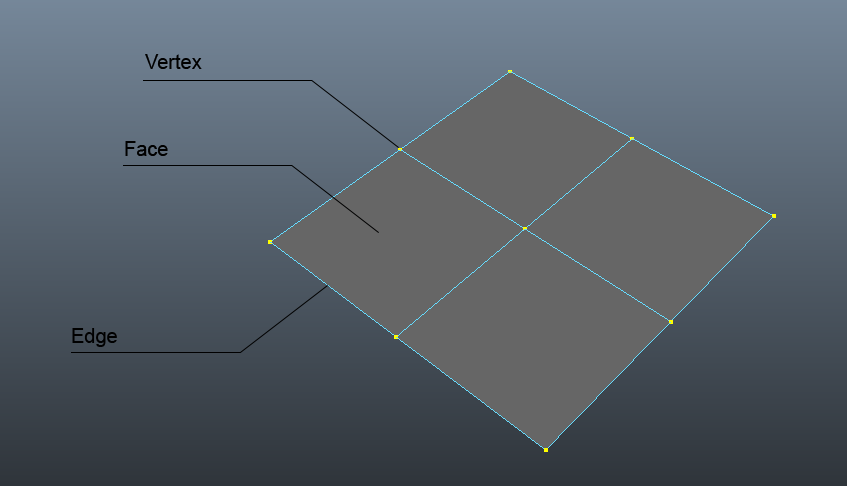
<style>
.page{position:relative;width:847px;height:486px;background:#666666}
.page>*{position:absolute;margin:0}
.t1{font:20px "ArialMT";color:#000000}
</style>
<div class="page">
<p class="t1" style="left:145px;top:54px;width:57px;height:15px">Vertex</p>
<p class="t1" style="left:125px;top:141px;width:43px;height:15px">Face</p>
<p class="t1" style="left:72px;top:328px;width:45px;height:19px">Edge</p>
</div>
